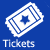
<style>
.page{position:relative;width:50px;height:50px;background:#0e3eaa}
.page>*{position:absolute;margin:0}
.t1{font:10px "OpenSans";color:#ffffff}
</style>
<div class="page">
<p class="t1" style="left:2px;top:39px;width:33px;height:9px">Tickets</p>
</div>
